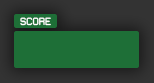
<style>
.page{position:relative;width:154px;height:83px;background:#1e6f37}
.page>*{position:absolute;margin:0}
.t1{font:10.9px "WhiteRabbit";color:#ffffff}
</style>
<div class="page">
<p class="t1" style="left:20px;top:17px;width:31px;height:9px">SCORE</p>
</div>
